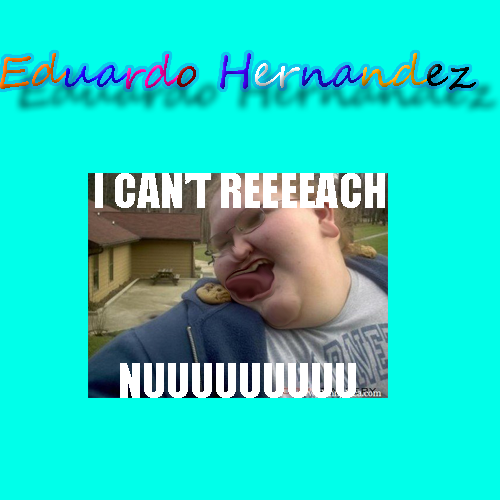
<style>
.page{position:relative;width:500px;height:500px;background:#00ffea}
.page>*{position:absolute;margin:0}
.t1{font:44px "SegoeScript"}
.t2{font:44px "Impact";color:#ffffff}
</style>
<div class="page">
<p class="t1" style="left:0px;top:53px;width:476px;height:37px">Eduardo Hernandez</p>
<p class="t2" style="left:95px;top:173px;width:290px;height:35px">I CAN’T REEEEACH</p>
<p class="t2" style="left:120px;top:363px;width:236px;height:35px">NUUUUUUUUU</p>
</div>
